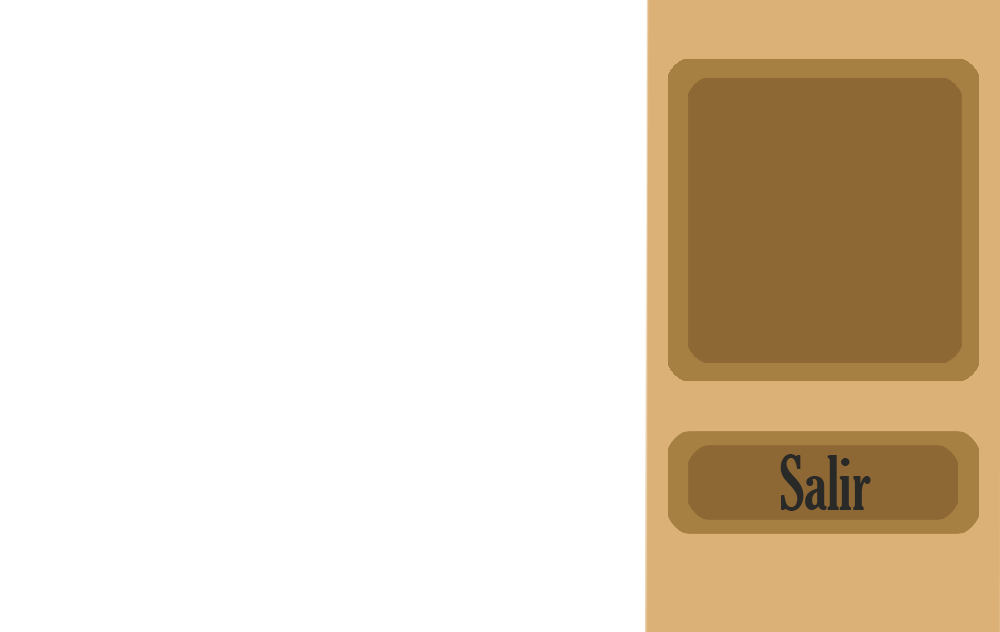
<style>
.page{position:relative;width:1000px;height:632px;background:#ffffff}
.page>*{position:absolute;margin:0}
.t1{font:72px "GloucesterMT-ExtraCondensed";color:#292928}
</style>
<div class="page">
<p class="t1" style="left:780px;top:454px;width:91px;height:57px">Salir</p>
</div>
